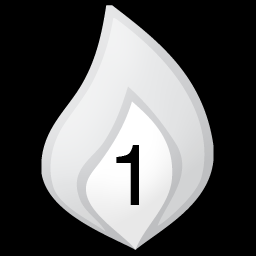
<style>
.page{position:relative;width:256px;height:256px;background:#000000}
.page>*{position:absolute;margin:0}
.t1{font:87.7px "Helvetica";color:#000000}
</style>
<div class="page">
<p class="t1" style="left:116px;top:145px;width:23px;height:60px">1</p>
</div>
